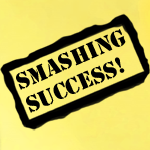
<style>
.page{position:relative;width:150px;height:150px}
.page>*{position:absolute;margin:0}
.t1{font:21.1px "StencilStd";color:#000000}
</style>
<div class="page">
<p class="t1" style="left:16px;top:29px;width:110px;height:84px;rotate:-24deg">SMASHING<br>SUCCESS!</p>
</div>
